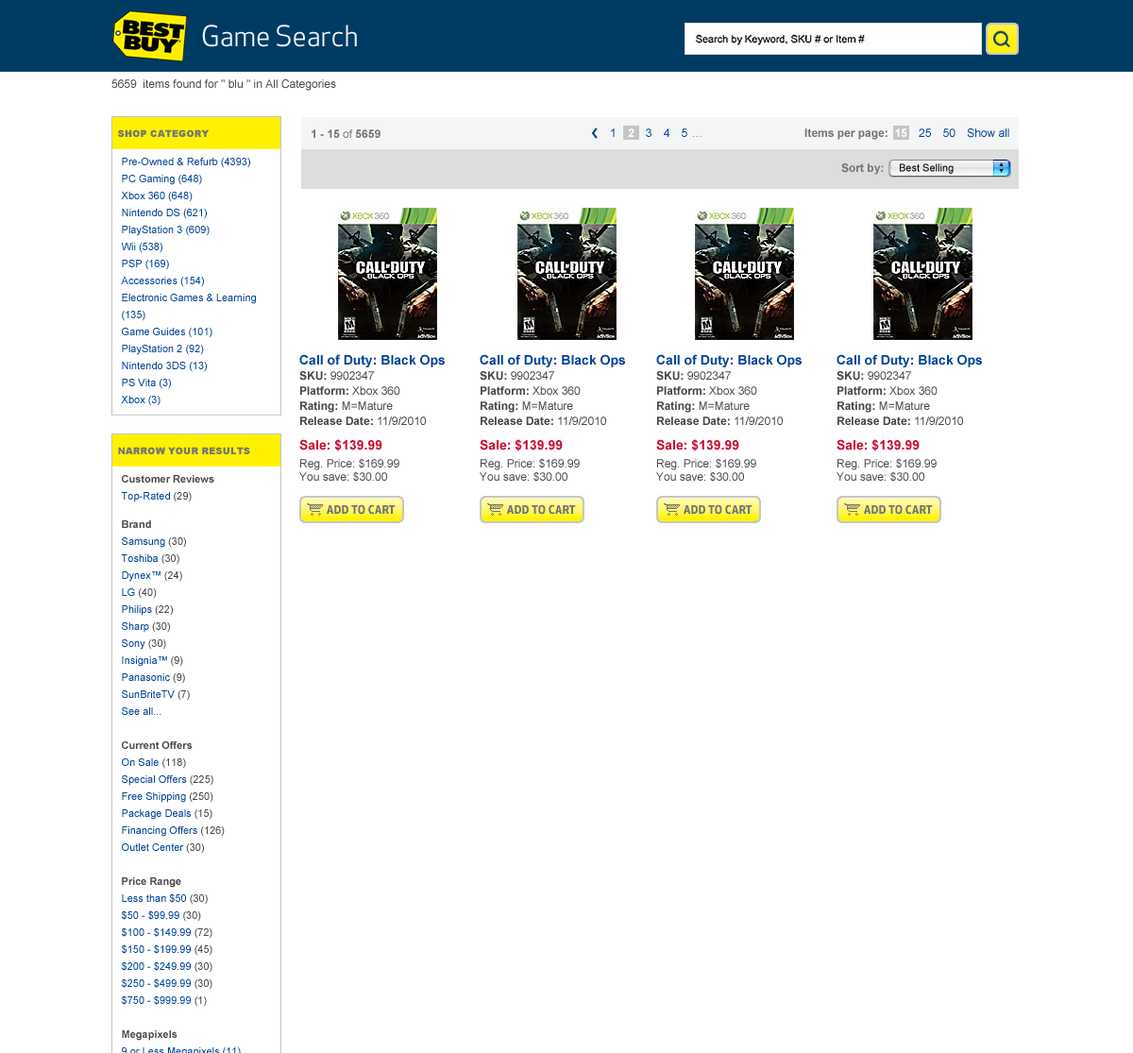
<style>
.page{position:relative;width:1133px;height:1053px;background:#ffffff}
.page>*{position:absolute;margin:0}
.t1{font:28.3px "BBYApex-Book";color:#f2f2f2}
.t2{font:11.3px "ArialMT";color:#474749}
.t3{font:9.4px "Arial-Black";color:#737575;text-transform:uppercase}
.t4{font:11.3px "Arial-BoldMT";color:#737575}
.t5{font:11.3px "ArialMT";color:#737575}
.t6{font:11.3px "ArialMT";letter-spacing:0.37em;color:#004495}
.t7{font:11.3px "Arial-BoldMT";letter-spacing:0.37em;color:#ffffff}
.t8{font:11.3px "ArialMT";letter-spacing:0.37em;color:#737575}
.t9{font:11.3px "Arial-BoldMT";color:#ffffff}
.t10{font:11.3px "ArialMT";color:#004495}
.t11{font:10.4px/17px "ArialMT";color:#004495}
.t12{font:10.4px "ArialMT";color:#000000}
.t13{font:13.2px/15.1px "Arial-BoldMT";color:#004495}
.t14{font:11.3px/15.1px "Arial-BoldMT";color:#474749}
.t15{font:11.3px/15.1px "ArialMT";color:#474749}
.t16{font:13.2px "Arial-BoldMT";color:#cc0a2e}
.t17{font:11.3px/13.2px "ArialMT";color:#474749}
</style>
<div class="page">
<p class="t1" style="left:202px;top:25px;width:155px;height:22px">Game Search</p>
<p class="t2" style="left:111px;top:79px;width:225px;height:12px">5659  items found for " blu " in All Categories</p>
<p class="t3" style="left:118px;top:129px;width:92px;height:8px">Shop Category</p>
<p class="t4" style="left:312px;top:129px;width:68px;height:9px">1 - 15<span class="t5"> of </span>5659</p>
<p class="t6" style="left:611px;top:128px;width:90px;height:9px">1 <span class="t7">2 </span>3 4 5<span class="t8">…</span></p>
<p class="t4" style="left:804px;top:128px;width:205px;height:12px">Items per page:  <span class="t9">1</span><span class="t7">5 </span><span class="t10">2</span><span class="t6">5 </span><span class="t10">5</span><span class="t6">0 </span><span class="t10">Show all</span></p>
<p class="t11" style="left:121px;top:158px;width:135px;height:248px">Pre-Owned &amp; Refurb (4393)<br>PC Gaming (648)<br>Xbox 360 (648)<br>Nintendo DS (621)<br>PlayStation 3 (609)<br>Wii (538)<br>PSP (169)<br>Accessories (154)<br>Electronic Games &amp; Learning (135)<br>Game Guides (101)<br>PlayStation 2 (92)<br>Nintendo 3DS (13)<br>PS Vita (3)<br>Xbox (3)<br>    * Gift Cards (25)<br>    * Cameras &amp; Camcorders (24)<br>    * Office Products (15)<br>    * Computers (14)<br>    * Magnolia Home Theater (11)<br>    * Home &amp; Appliances (10)<br>    * Gift Center (7)<br>    * Video Games &amp; Gadgets (4)<br>    * GPS, Car &amp; Marine (1)</p>
<p class="t4" style="left:841px;top:163px;width:43px;height:12px">Sort by:</p>
<p class="t12" style="left:900px;top:163px;width:53px;height:11px">Best Selling</p>
<p class="t13" style="left:299px;top:354px;width:146px;height:71px">Call of Duty: Black Ops<br><span class="t14">SKU: </span><span class="t15">9902347<br></span><span class="t14">Platform:</span><span class="t15"> Xbox 360 <br></span><span class="t14">Rating:</span><span class="t15"> M=Mature <br></span><span class="t14">Release Date:</span><span class="t15"> 11/9/2010</span></p>
<p class="t13" style="left:480px;top:354px;width:145px;height:71px">Call of Duty: Black Ops<br><span class="t14">SKU: </span><span class="t15">9902347<br></span><span class="t14">Platform:</span><span class="t15"> Xbox 360 <br></span><span class="t14">Rating:</span><span class="t15"> M=Mature <br></span><span class="t14">Release Date:</span><span class="t15"> 11/9/2010</span></p>
<p class="t13" style="left:656px;top:354px;width:145px;height:71px">Call of Duty: Black Ops<br><span class="t14">SKU: </span><span class="t15">9902347<br></span><span class="t14">Platform:</span><span class="t15"> Xbox 360 <br></span><span class="t14">Rating:</span><span class="t15"> M=Mature <br></span><span class="t14">Release Date:</span><span class="t15"> 11/9/2010</span></p>
<p class="t13" style="left:836px;top:354px;width:146px;height:71px">Call of Duty: Black Ops<br><span class="t14">SKU: </span><span class="t15">9902347<br></span><span class="t14">Platform:</span><span class="t15"> Xbox 360 <br></span><span class="t14">Rating:</span><span class="t15"> M=Mature <br></span><span class="t14">Release Date:</span><span class="t15"> 11/9/2010</span></p>
<p class="t3" style="left:118px;top:447px;width:132px;height:7px">Narrow your results</p>
<p class="t16" style="left:299px;top:439px;width:83px;height:12px">Sale: $139.99</p>
<p class="t16" style="left:480px;top:439px;width:83px;height:12px">Sale: $139.99</p>
<p class="t16" style="left:656px;top:439px;width:83px;height:12px">Sale: $139.99</p>
<p class="t16" style="left:836px;top:439px;width:83px;height:12px">Sale: $139.99</p>
<p class="t17" style="left:299px;top:458px;width:100px;height:23px">Reg. Price: $169.99<br>You save: $30.00</p>
<p class="t17" style="left:480px;top:458px;width:100px;height:23px">Reg. Price: $169.99<br>You save: $30.00</p>
<p class="t17" style="left:656px;top:458px;width:100px;height:23px">Reg. Price: $169.99<br>You save: $30.00</p>
<p class="t17" style="left:836px;top:458px;width:100px;height:23px">Reg. Price: $169.99<br>You save: $30.00</p>
</div>
